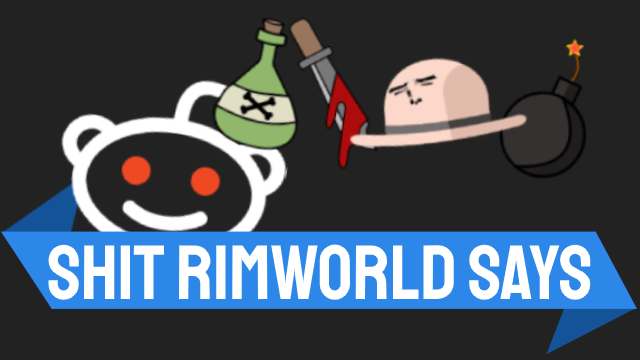
<style>
.page{position:relative;width:640px;height:360px;background:#222222}
.page>*{position:absolute;margin:0}
.t1{font:77px "Staatliches-Regular";color:#ffffff}
</style>
<div class="page">
<p class="t1" style="left:48px;top:244px;width:543px;height:56px">Shit Rimworld Says</p>
</div>
